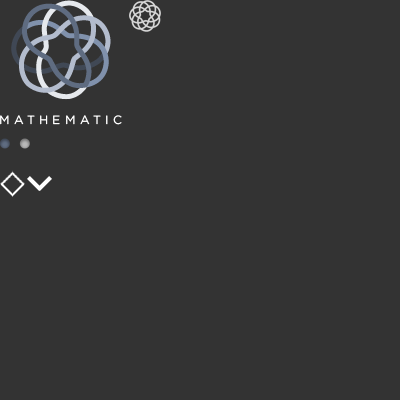
<style>
.page{position:relative;width:400px;height:400px;background:#333333}
.page>*{position:absolute;margin:0}
.t1{font:12px "Gotham-Book";letter-spacing:0.36em;color:#ffffff}
</style>
<div class="page">
<p class="t1" style="left:0px;top:115px;width:122px;height:10px">MATHEMATIC</p>
</div>
